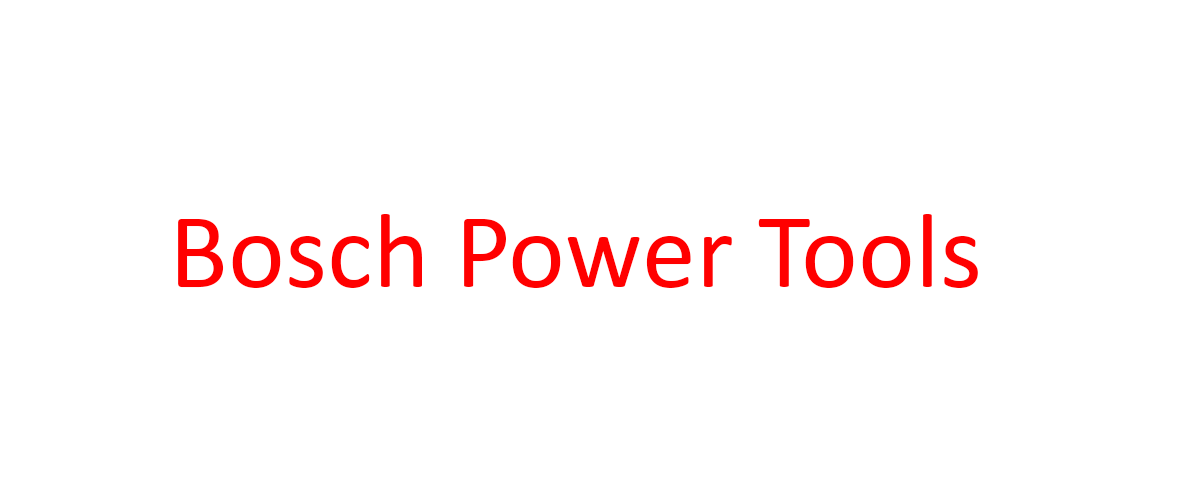
<style>
.page{position:relative;width:1201px;height:501px;background:#ffffff}
.page>*{position:absolute;margin:0}
.t1{font:108.3px "Calibri";color:#ff0000}
</style>
<div class="page">
<p class="t1" style="left:178px;top:214px;width:800px;height:74px">Bosch Power Tools</p>
</div>
